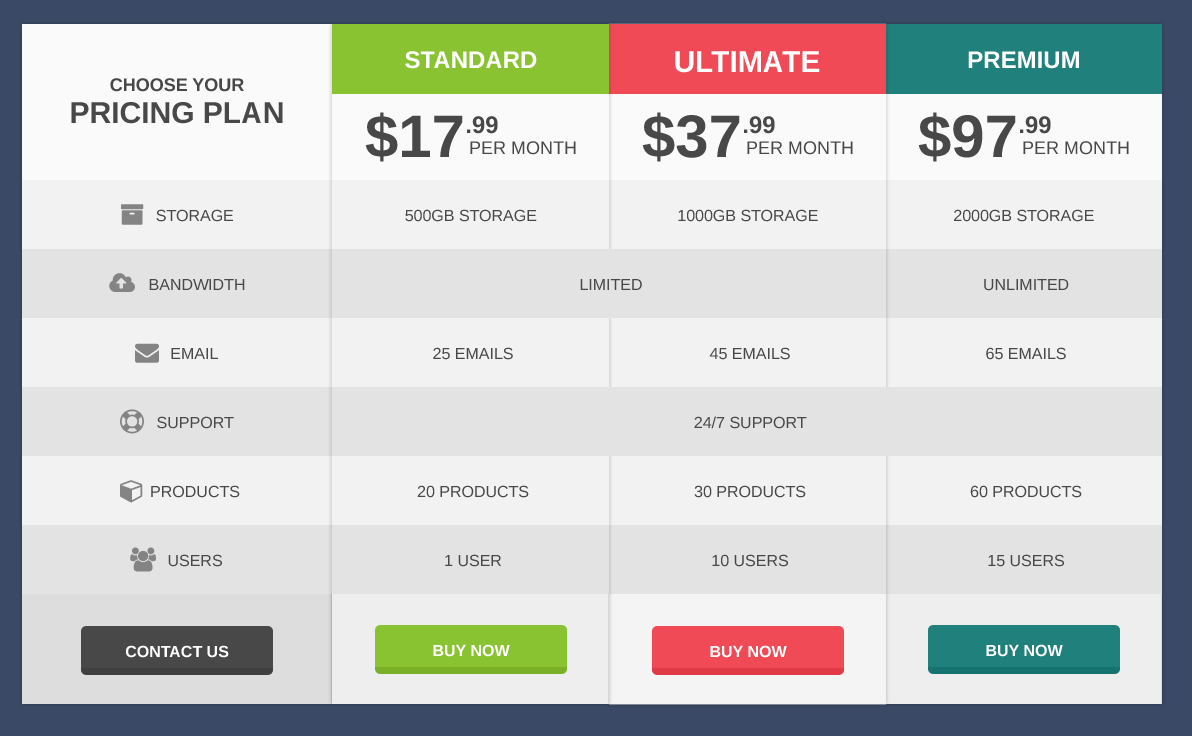
<style>
.page{position:relative;width:1192px;height:736px;background:#e3e3e3}
.page>*{position:absolute;margin:0}
.t1{font:24px "Arimo-Bold";color:#ffffff;text-transform:uppercase}
.t2{font:30px "Arimo-Bold";color:#ffffff;text-transform:uppercase}
.t3{font:18px "Arimo-Bold";color:#484848;text-transform:uppercase}
.t4{font:30px "Arimo-Bold";color:#484848;text-transform:uppercase}
.t5{font:60px "Arimo-Bold";color:#484848;text-transform:uppercase}
.t6{font:24px "Arimo-Bold";color:#484848;text-transform:uppercase}
.t7{font:18px "Arimo";color:#484848;text-transform:uppercase}
.t8{font:16px "Arimo";color:#484848;text-transform:uppercase}
.t9{font:16px "Arimo-Bold";color:#ffffff;text-transform:uppercase}
</style>
<div class="page">
<p class="t1" style="left:405px;top:51px;width:132px;height:18px">standard</p>
<p class="t2" style="left:675px;top:51px;width:145px;height:22px">ultimate</p>
<p class="t1" style="left:968px;top:51px;width:111px;height:18px">premium</p>
<p class="t3" style="left:110px;top:78px;width:134px;height:14px">Choose your</p>
<p class="t4" style="left:71px;top:102px;width:212px;height:22px">pricing plan</p>
<p class="t5" style="left:365px;top:112px;width:98px;height:50px">$17</p>
<p class="t5" style="left:642px;top:112px;width:98px;height:50px">$37</p>
<p class="t5" style="left:918px;top:112px;width:98px;height:50px">$97</p>
<p class="t6" style="left:467px;top:116px;width:31px;height:18px">.99</p>
<p class="t6" style="left:744px;top:116px;width:31px;height:18px">.99</p>
<p class="t6" style="left:1020px;top:116px;width:31px;height:18px">.99</p>
<p class="t7" style="left:470px;top:141px;width:106px;height:14px">Per Month</p>
<p class="t7" style="left:747px;top:141px;width:106px;height:14px">Per Month</p>
<p class="t7" style="left:1023px;top:141px;width:106px;height:14px">Per Month</p>
<p class="t8" style="left:156px;top:209px;width:77px;height:13px">Storage</p>
<p class="t8" style="left:405px;top:209px;width:132px;height:13px">500GB Storage</p>
<p class="t8" style="left:678px;top:209px;width:140px;height:13px">1000GB Storage</p>
<p class="t8" style="left:954px;top:209px;width:140px;height:13px">2000GB Storage</p>
<p class="t8" style="left:149px;top:279px;width:96px;height:11px">Bandwidth</p>
<p class="t8" style="left:580px;top:279px;width:62px;height:11px">limited</p>
<p class="t8" style="left:984px;top:279px;width:85px;height:12px">unlimited</p>
<p class="t8" style="left:171px;top:348px;width:47px;height:11px">Email</p>
<p class="t8" style="left:433px;top:347px;width:80px;height:13px">25 emails</p>
<p class="t8" style="left:709px;top:347px;width:81px;height:13px">45 emails</p>
<p class="t8" style="left:986px;top:347px;width:80px;height:13px">65 emails</p>
<p class="t8" style="left:157px;top:416px;width:77px;height:13px">support</p>
<p class="t8" style="left:694px;top:416px;width:113px;height:13px">24/7 support</p>
<p class="t8" style="left:151px;top:485px;width:89px;height:13px">products</p>
<p class="t8" style="left:417px;top:485px;width:112px;height:13px">20 products</p>
<p class="t8" style="left:694px;top:485px;width:112px;height:13px">30 products</p>
<p class="t8" style="left:970px;top:485px;width:112px;height:13px">60 products</p>
<p class="t8" style="left:168px;top:554px;width:54px;height:13px">users</p>
<p class="t8" style="left:445px;top:554px;width:56px;height:13px">1 user</p>
<p class="t8" style="left:712px;top:554px;width:76px;height:13px">10 users</p>
<p class="t8" style="left:988px;top:554px;width:76px;height:13px">15 users</p>
<p class="t9" style="left:126px;top:645px;width:103px;height:13px">contact us</p>
<p class="t9" style="left:433px;top:644px;width:77px;height:13px">buy now</p>
<p class="t9" style="left:710px;top:645px;width:77px;height:13px">buy now</p>
<p class="t9" style="left:986px;top:644px;width:77px;height:13px">buy now</p>
</div>
